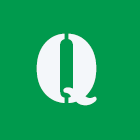
<style>
.page{position:relative;width:140px;height:140px;background:#009a4d}
.page>*{position:absolute;margin:0}
.t1{font:100px "Stencil";color:#f4f7fa}
</style>
<div class="page">
<p class="t1" style="left:36px;top:33px;width:61px;height:73px">Q</p>
</div>
